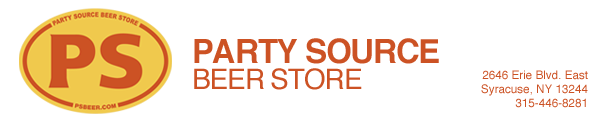
<style>
.page{position:relative;width:600px;height:120px;background:#ffffff}
.page>*{position:absolute;margin:0}
.t1{font:33.1px "Helvetica-Bold";letter-spacing:-0.04em;color:#cc5224}
.t2{font:28px "Helvetica";letter-spacing:-0.04em;color:#cc5224}
.t3{font:11.7px/14px "Helvetica";color:#cc5224}
</style>
<div class="page">
<p class="t1" style="left:194px;top:38px;width:245px;height:26px">PARTY SOURCE</p>
<p class="t2" style="left:194px;top:68px;width:168px;height:22px">BEER STORE</p>
<p class="t3" style="left:481px;top:70px;width:107px;height:38px;text-align:right">2646 Erie Blvd. East<br>Syracuse, NY 13244<br>315-446-8281</p>
</div>
